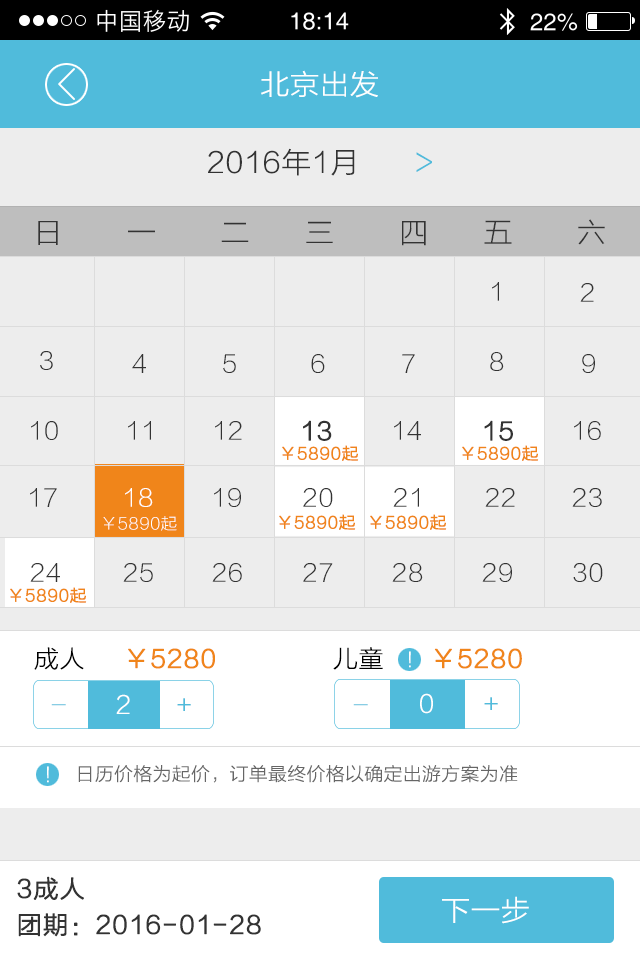
<style>
.page{position:relative;width:640px;height:960px;background:#ededed}
.page>*{position:absolute;margin:0}
.t1{font:28px "STHeitiSC-Light";letter-spacing:-0.04em;color:#ffffff;scale:1.03 1}
.t2{font:28px "STHeitiSC-Light";letter-spacing:-0.04em;color:#333333;scale:1.03 1}
.t3{font:28px "STHeitiSC-Light";letter-spacing:-0.04em;color:#50bbdb;scale:1.03 1}
.t4{font:24px "STHeitiSC-Light";letter-spacing:-0.04em;color:#333333;scale:1.03 1}
.t5{font:24px "STHeitiSC-Light";letter-spacing:-0.04em;color:#333333;font-weight:bold;scale:1.03 1}
.t6{font:16px "STHeitiSC-Light";letter-spacing:-0.04em;color:#f0851a;font-weight:bold;scale:1.03 1}
.t7{font:24px "STHeitiSC-Light";letter-spacing:-0.04em;color:#ffffff;scale:1.03 1}
.t8{font:16px "STHeitiSC-Light";letter-spacing:-0.04em;color:#ffffff;scale:1.03 1}
.t9{font:24px "STHeitiSC-Light";letter-spacing:-0.04em;color:#f0851a;font-weight:bold;scale:1.03 1}
.t10{font:24px "STHeitiSC-Light";letter-spacing:-0.04em;color:#000000;scale:1.03 1}
.t11{font:24px "STHeitiSC-Light";letter-spacing:-0.04em;color:#50bbdb;scale:1.03 1}
.t12{font:14px "STHeitiSC-Light";letter-spacing:-0.04em;scale:1.03 1}
.t13{font:18px "STHeitiSC-Light";letter-spacing:-0.04em;color:#666666;scale:1.03 1}
.t14{font:24px/36px "STHeitiSC-Light";letter-spacing:-0.04em;color:#333333;font-weight:bold;scale:1.03 1}
</style>
<div class="page">
<p class="t1" style="left:261px;top:70px;width:117px;height:28px">北京出发</p>
<p class="t2" style="left:208px;top:148px;width:224px;height:28px">2016年1月      <span class="t3">&gt;</span></p>
<p class="t2" style="left:38px;top:219px;width:567px;height:27px">日       一       二      三       四      五       六</p>
<p class="t4" style="left:492px;top:282px;width:7px;height:19px">1</p>
<p class="t4" style="left:580px;top:283px;width:14px;height:19px">2</p>
<p class="t4" style="left:40px;top:351px;width:13px;height:19px">3</p>
<p class="t4" style="left:490px;top:352px;width:14px;height:19px">8</p>
<p class="t4" style="left:132px;top:354px;width:14px;height:19px">4</p>
<p class="t4" style="left:223px;top:354px;width:13px;height:19px">5</p>
<p class="t4" style="left:311px;top:354px;width:14px;height:19px">6</p>
<p class="t4" style="left:402px;top:354px;width:13px;height:19px">7</p>
<p class="t4" style="left:582px;top:354px;width:13px;height:19px">9</p>
<p class="t4" style="left:31px;top:421px;width:27px;height:19px">10</p>
<p class="t4" style="left:128px;top:421px;width:23px;height:19px">11</p>
<p class="t4" style="left:215px;top:421px;width:27px;height:19px">12</p>
<p class="t5" style="left:303px;top:420px;width:29px;height:21px">13</p>
<p class="t4" style="left:394px;top:421px;width:27px;height:19px">14</p>
<p class="t5" style="left:484px;top:420px;width:29px;height:21px">15</p>
<p class="t4" style="left:574px;top:421px;width:27px;height:19px">16</p>
<p class="t6" style="left:282px;top:445px;width:77px;height:16px">￥5890起</p>
<p class="t6" style="left:462px;top:445px;width:77px;height:16px">￥5890起</p>
<p class="t4" style="left:30px;top:488px;width:27px;height:19px">17</p>
<p class="t7" style="left:125px;top:488px;width:28px;height:19px">18</p>
<p class="t4" style="left:214px;top:488px;width:27px;height:19px">19</p>
<p class="t4" style="left:303px;top:488px;width:30px;height:19px">20</p>
<p class="t4" style="left:393px;top:488px;width:26px;height:19px">21</p>
<p class="t4" style="left:485px;top:488px;width:30px;height:19px">22</p>
<p class="t4" style="left:572px;top:488px;width:30px;height:19px">23</p>
<p class="t8" style="left:103px;top:516px;width:74px;height:15px">￥5890起</p>
<p class="t6" style="left:279px;top:514px;width:77px;height:16px">￥5890起</p>
<p class="t6" style="left:370px;top:514px;width:77px;height:16px">￥5890起</p>
<p class="t4" style="left:30px;top:563px;width:30px;height:19px">24</p>
<p class="t4" style="left:123px;top:563px;width:30px;height:19px">25</p>
<p class="t4" style="left:212px;top:563px;width:30px;height:19px">26</p>
<p class="t4" style="left:303px;top:563px;width:30px;height:19px">27</p>
<p class="t4" style="left:392px;top:563px;width:31px;height:19px">28</p>
<p class="t4" style="left:482px;top:563px;width:30px;height:19px">29</p>
<p class="t4" style="left:573px;top:563px;width:30px;height:19px">30</p>
<p class="t6" style="left:10px;top:587px;width:77px;height:16px">￥5890起</p>
<p class="t9" style="left:34px;top:647px;width:181px;height:23px"><span class="t10">成人     </span>￥5280</p>
<p class="t9" style="left:333px;top:647px;width:189px;height:23px"><span class="t10">儿童      </span>￥5280</p>
<p class="t7" style="left:116px;top:694px;width:14px;height:20px">2</p>
<p class="t11" style="left:177px;top:698px;width:14px;height:13px">+</p>
<p class="t7" style="left:420px;top:693px;width:13px;height:21px">0</p>
<p class="t11" style="left:484px;top:697px;width:14px;height:13px">+</p>
<p class="t12" style="left:51px;top:704px;width:15px;height:2px">一</p>
<p class="t12" style="left:353px;top:704px;width:15px;height:2px">一</p>
<p class="t13" style="left:78px;top:765px;width:440px;height:18px">日历价格为起价，订单最终价格以确定出游方案为准</p>
<p class="t14" style="left:17px;top:876px;width:244px;height:61px">3成人<br>团期：2016-01-28</p>
<p class="t1" style="left:442px;top:896px;width:87px;height:28px">下一步</p>
</div>
